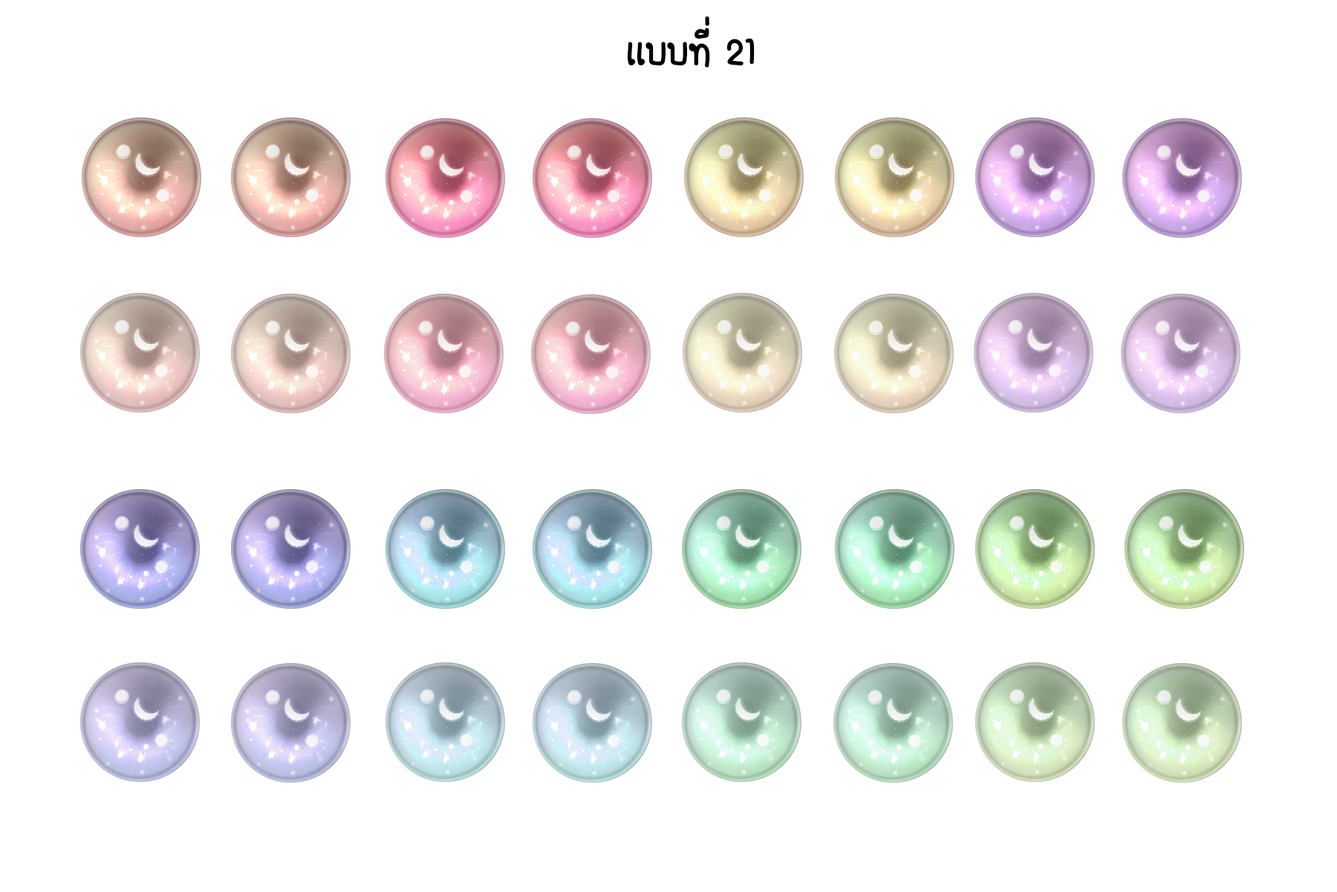
<style>
.page{position:relative;width:1337px;height:892px;background:#ffffff}
.page>*{position:absolute;margin:0}
.t1{font:55.7px "FCDaisyRegular";color:#000000}
</style>
<div class="page">
<p class="t1" style="left:627px;top:16px;width:128px;height:52px">เเบบที่ 21</p>
</div>
